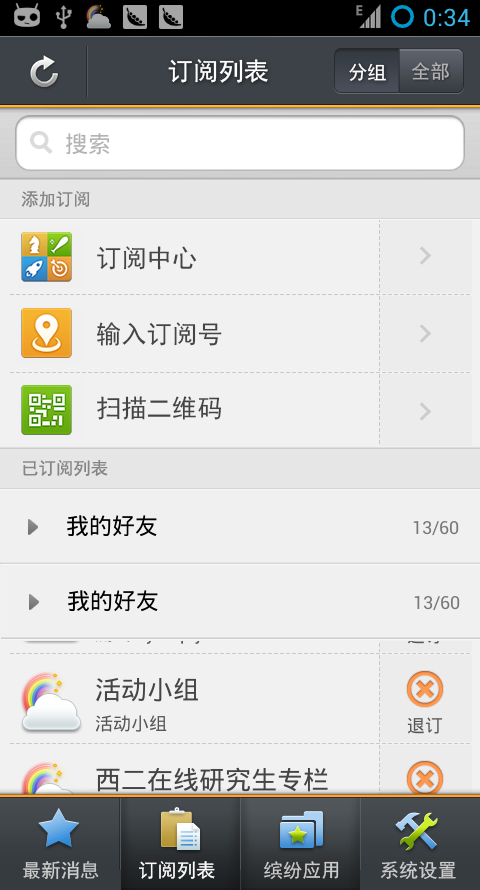
<style>
.page{position:relative;width:480px;height:890px;background:#f1f1f1}
.page>*{position:absolute;margin:0}
.t1{font:25.3px "SimHei";color:#ffffff}
.t2{font:19.3px "SimHei";color:#ffffff}
.t3{font:19.3px "SimHei";color:#b5b5b5}
.t4{font:17.3px "SimHei";color:#858585}
.t5{font:25.3px "SimHei";color:#444444}
.t6{font:19.3px "SimHei";color:#cccccc}
</style>
<div class="page">
<p class="t1" style="left:168px;top:59px;width:100px;height:24px">订阅列表</p>
<p class="t2" style="left:349px;top:63px;width:37px;height:18px">分组</p>
<p class="t3" style="left:412px;top:62px;width:37px;height:19px;opacity:0.96">全部</p>
<p class="t4" style="left:21px;top:191px;width:69px;height:17px">添加订阅</p>
<p class="t5" style="left:97px;top:246px;width:100px;height:24px">订阅中心</p>
<p class="t5" style="left:97px;top:322px;width:125px;height:24px">输入订阅号</p>
<p class="t5" style="left:97px;top:396px;width:125px;height:24px">扫描二维码</p>
<p class="t4" style="left:23px;top:460px;width:85px;height:17px">已订阅列表</p>
<p class="t6" style="left:23px;top:861px;width:433px;height:19px">最新消息<span class="t2">    订阅列表     </span>缤纷应用    系统设置</p>
</div>
